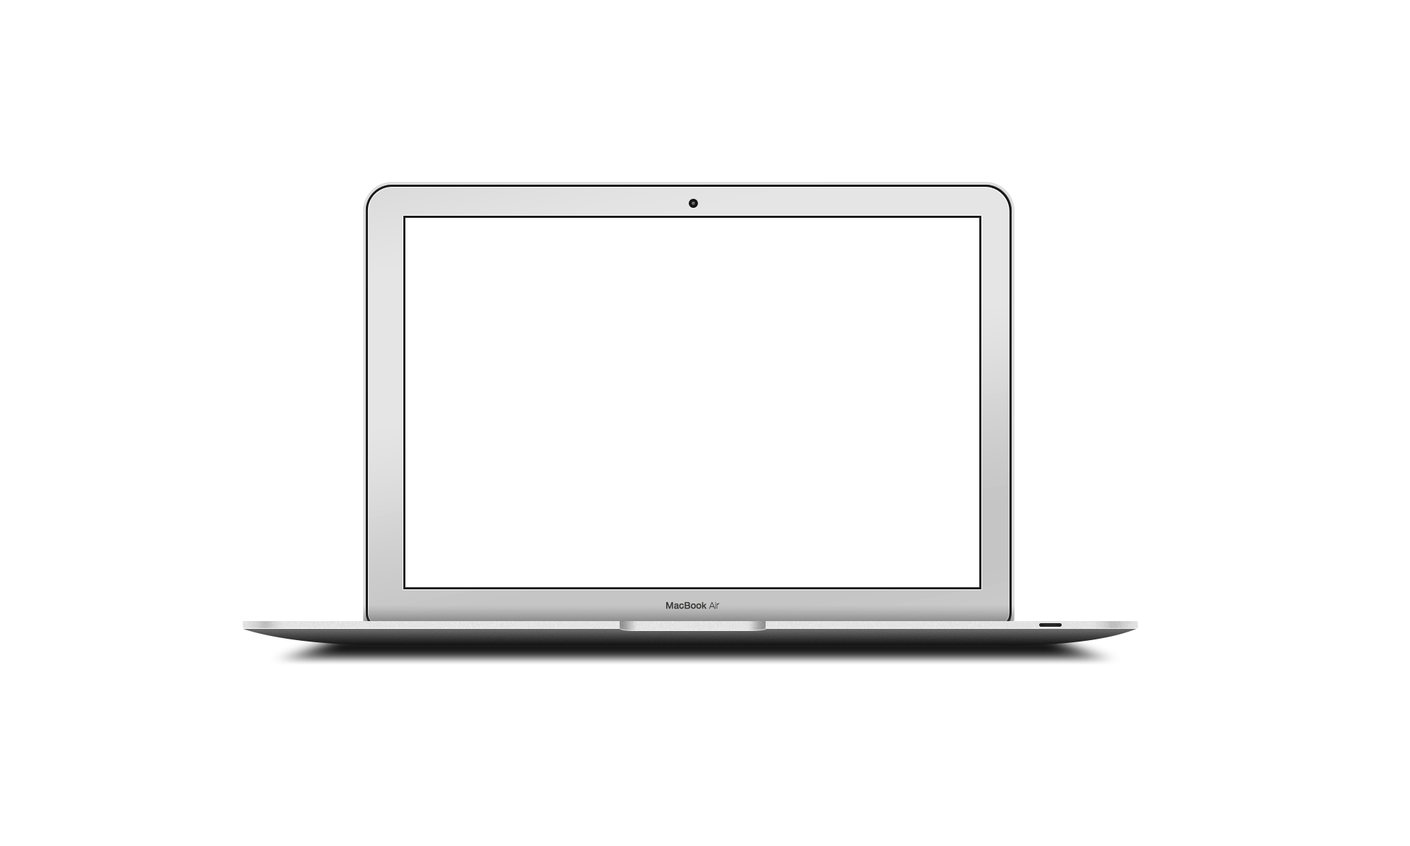
<style>
.page{position:relative;width:1410px;height:846px;background:#ffffff}
.page>*{position:absolute;margin:0}
.t1{font:9.2px "HelveticaNeue";color:#3c3c3b;font-weight:bold}
.t2{font:9.2px "HelveticaNeue-UltraLight";color:#3c3c3b;font-weight:bold}
</style>
<div class="page">
<p class="t1" style="left:665px;top:602px;width:55px;height:7px">MacBook <span class="t2">Air</span></p>
</div>
